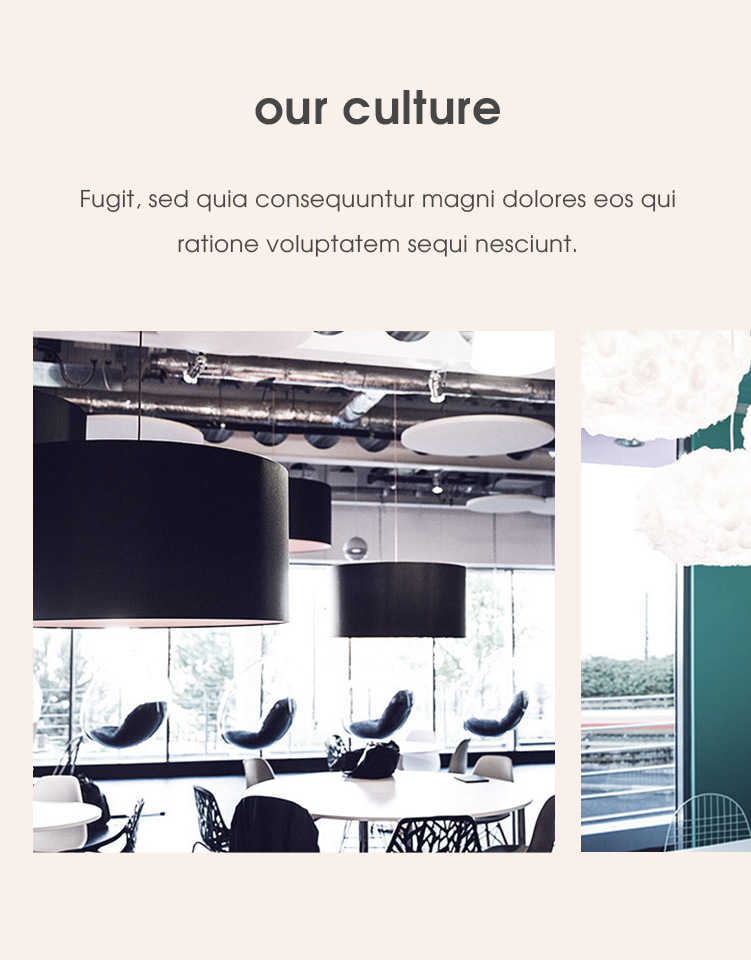
<style>
.page{position:relative;width:751px;height:960px;background:#f9f0e9}
.page>*{position:absolute;margin:0}
.t1{font:46px "MIssguided";letter-spacing:0.02em;color:#474747}
.t2{font:23px/45px "MIssguided_Light";letter-spacing:0.02em;color:#474747}
</style>
<div class="page">
<p class="t1" style="left:255px;top:90px;width:245px;height:35px">our culture</p>
<p class="t2" style="left:81px;top:189px;width:594px;height:68px;text-align:center">Fugit, sed quia consequuntur magni dolores eos qui ratione voluptatem sequi nesciunt.</p>
</div>
